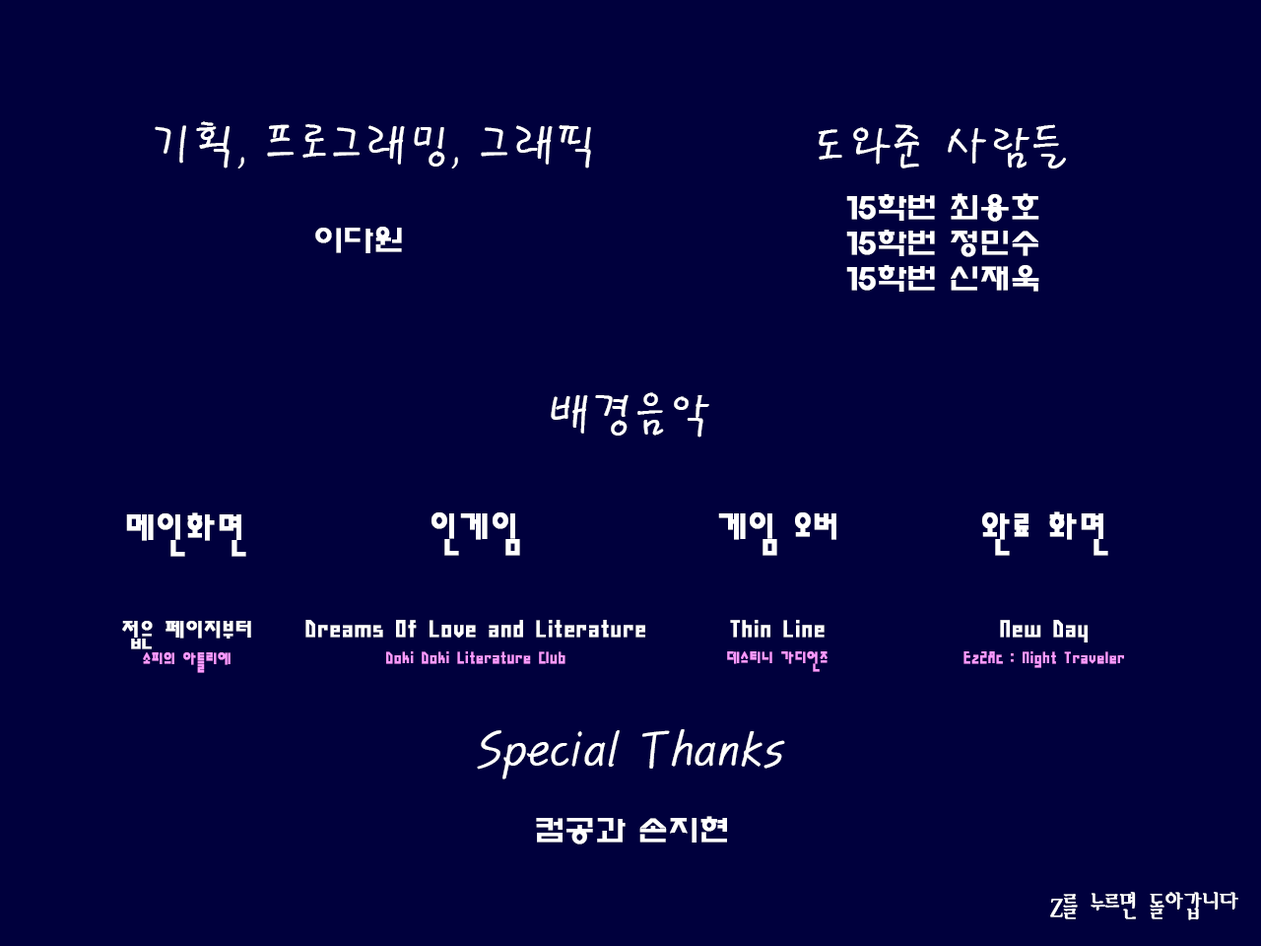
<style>
.page{position:relative;width:1261px;height:946px;background:#00003d}
.page>*{position:absolute;margin:0}
.t1{font:49.3px "PyunjiR-HM";color:#ffffff}
.t2{font:29.6px "ExpoM-HM";color:#ffffff;font-weight:bold}
.t3{font:44.3px "H2sa1M";color:#ffffff;font-weight:bold}
.t4{font:29.6px "H2sa1M";color:#ffffff;font-weight:bold}
.t5{font:19.7px "H2sa1M";color:#fb99ff;font-weight:bold}
.t6{font:29.6px "AmiR-HM";color:#ffffff;font-weight:bold}
</style>
<div class="page">
<p class="t1" style="left:155px;top:121px;width:436px;height:47px">기획, 프로그래밍, 그래픽</p>
<p class="t1" style="left:818px;top:124px;width:248px;height:44px">도와준 사람들</p>
<p class="t2" style="left:846px;top:193px;width:193px;height:99px;text-align:right">15학번 최용호<br>15학번 정민수<br>15학번 신재욱</p>
<p class="t2" style="left:315px;top:227px;width:87px;height:26px">이다원</p>
<p class="t1" style="left:551px;top:392px;width:158px;height:45px">배경음악</p>
<p class="t3" style="left:126px;top:512px;width:120px;height:45px">메인화면</p>
<p class="t3" style="left:431px;top:512px;width:89px;height:44px">인게임</p>
<p class="t3" style="left:718px;top:512px;width:118px;height:44px">게임 오버</p>
<p class="t3" style="left:982px;top:511px;width:126px;height:45px">완료 화면</p>
<p class="t4" style="left:122px;top:621px;width:129px;height:52px;text-align:center">접은 페이지부터<br><span class="t5">소피의 아틀리에</span></p>
<p class="t4" style="left:305px;top:620px;width:340px;height:44px;text-align:center">Dreams Of Love and Literature<br><span class="t5">Doki Doki Literature Club</span></p>
<p class="t4" style="left:727px;top:620px;width:100px;height:52px;text-align:center">Thin Line<br><span class="t5">데스티니 가디언즈</span></p>
<p class="t5" style="left:963px;top:620px;width:161px;height:48px;text-align:center"><span class="t4">New Day<br></span>Ez2Ac : Night Traveler</p>
<p class="t1" style="left:477px;top:729px;width:308px;height:50px">Special Thanks</p>
<p class="t2" style="left:536px;top:816px;width:191px;height:28px">컴공과 손지현</p>
<p class="t6" style="left:1050px;top:892px;width:188px;height:28px">Z를 누르면 돌아갑니다</p>
</div>
